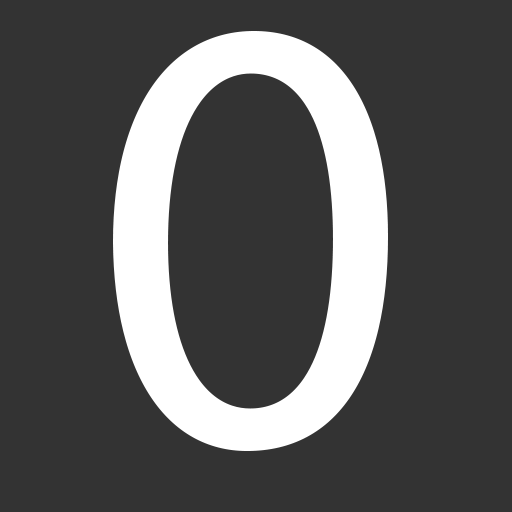
<style>
.page{position:relative;width:512px;height:512px;background:#333333}
.page>*{position:absolute;margin:0}
.t1{font:625px "MyriadPro-Regular";color:#ffffff}
</style>
<div class="page">
<p class="t1" style="left:113px;top:31px;width:275px;height:420px">0</p>
</div>
